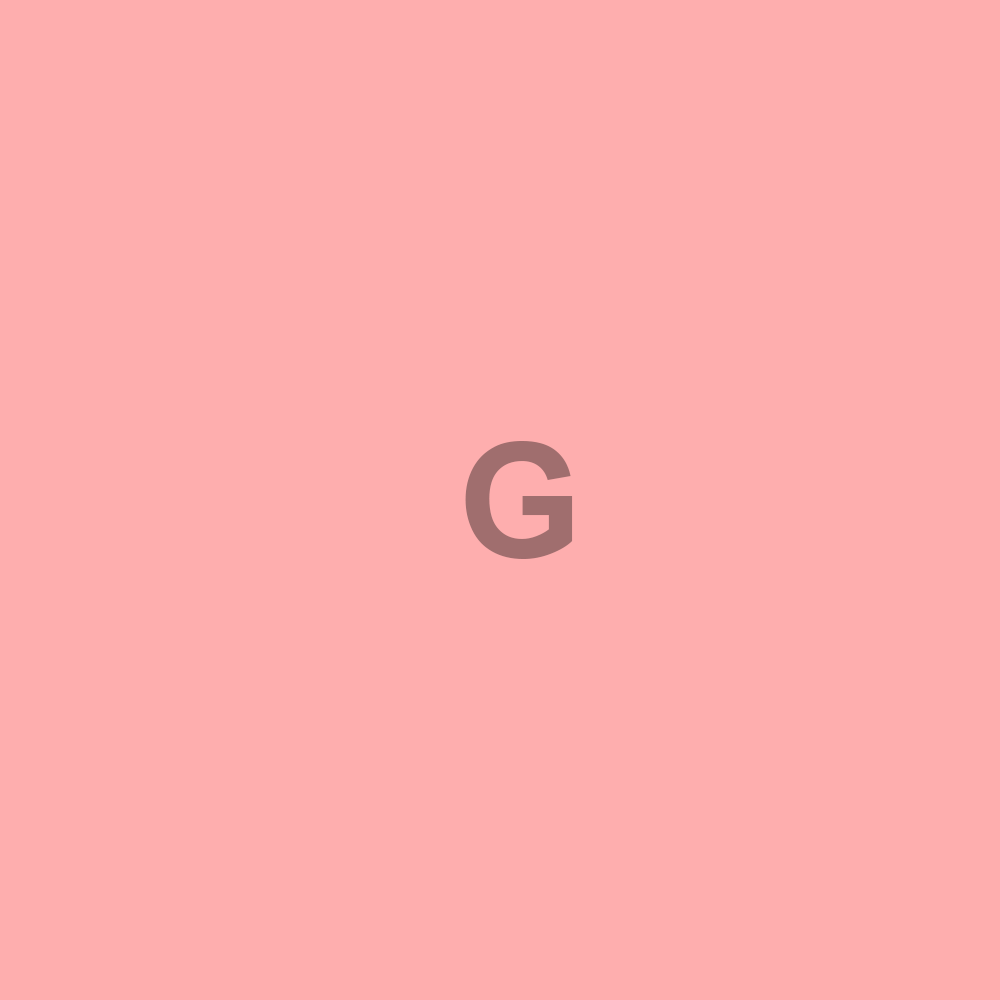
<style>
.page{position:relative;width:1000px;height:1000px;background:#feaeae}
.page>*{position:absolute;margin:0}
.t1{font:158.8px "Arial-BoldMT";color:#a06e6e}
</style>
<div class="page">
<p class="t1" style="left:465px;top:441px;width:108px;height:118px">G</p>
</div>
